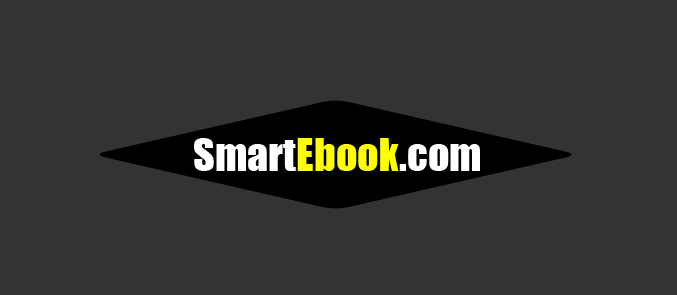
<style>
.page{position:relative;width:677px;height:295px;background:#333333}
.page>*{position:absolute;margin:0}
.t1{font:42.2px "Impact";color:#ffffff}
.t2{font:42.2px "Impact";color:#feff00}
</style>
<div class="page">
<p class="t1" style="left:194px;top:138px;width:286px;height:33px">Smart<span class="t2">Ebook</span>.com</p>
</div>
